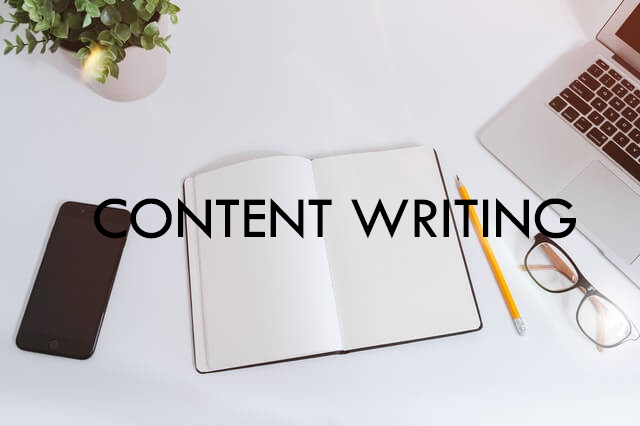
<style>
.page{position:relative;width:640px;height:426px}
.page>*{position:absolute;margin:0}
.t1{font:60px "TwCenMT-Regular";color:#000000}
</style>
<div class="page">
<p class="t1" style="left:94px;top:198px;width:482px;height:41px">CONTENT WRITING</p>
</div>
